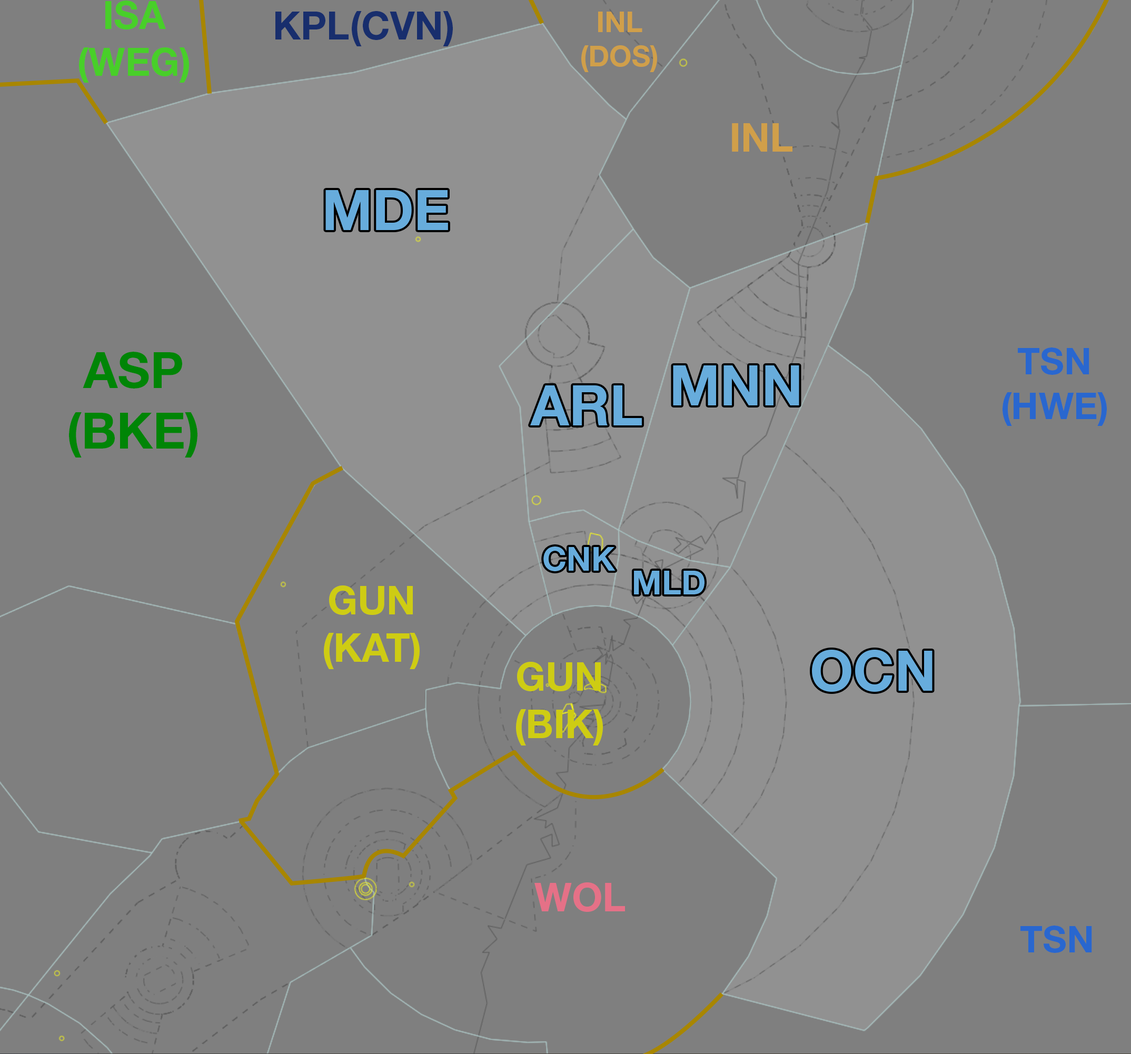
<style>
.page{position:relative;width:1131px;height:1054px;background:#7f7f7f}
.page>*{position:absolute;margin:0}
.t1{font:38.8px "HelveticaNeueLTStd-Bd";color:#48cf29}
.t2{font:38.8px "HelveticaNeueLTStd-Bd";color:#182e6d}
.t3{font:28.7px "HelveticaNeueLTStd-Bd";color:#d09f4a}
.t4{font:39.5px "HelveticaNeueLTStd-Bd";color:#d09f4a}
.t5{font:55.9px "HelveticaNeueLTStd-Bd";color:#67acdc}
.t6{font:50.1px "HelveticaNeueLTStd-Bd";color:#008506}
.t7{font:37.2px "HelveticaNeueLTStd-Bd";color:#2967cf}
.t8{font:33px "HelveticaNeueLTStd-Bd";color:#67acdc}
.t9{font:39.5px "HelveticaNeueLTStd-Bd";color:#cecc13}
.t10{font:39.5px "HelveticaNeueLTStd-Bd";color:#e57187}
</style>
<div class="page">
<p class="t1" style="left:79px;top:1px;width:110px;height:82px;text-align:center">ISA<br>(WEG)</p>
<p class="t2" style="left:275px;top:11px;width:178px;height:35px">KPL(CVN)</p>
<p class="t3" style="left:581px;top:12px;width:76px;height:60px;text-align:center">INL<br>(DOS)</p>
<p class="t4" style="left:732px;top:123px;width:61px;height:29px">INL</p>
<p class="t5" style="left:325px;top:190px;width:123px;height:40px">MDE</p>
<p class="t6" style="left:69px;top:352px;width:128px;height:106px;text-align:center">ASP<br>(BKE)</p>
<p class="t7" style="left:1003px;top:348px;width:104px;height:78px;text-align:center">TSN<br>(HWE)</p>
<p class="t5" style="left:673px;top:365px;width:126px;height:40px">MNN</p>
<p class="t5" style="left:530px;top:385px;width:112px;height:40px">ARL</p>
<p class="t8" style="left:543px;top:547px;width:73px;height:24px">CNK</p>
<p class="t8" style="left:634px;top:571px;width:71px;height:24px">MLD</p>
<p class="t9" style="left:324px;top:586px;width:96px;height:83px;text-align:center">GUN<br>(KAT)</p>
<p class="t5" style="left:812px;top:650px;width:121px;height:42px">OCN</p>
<p class="t9" style="left:516px;top:662px;width:87px;height:84px;text-align:center">GUN<br>(BIK)</p>
<p class="t10" style="left:534px;top:883px;width:91px;height:29px">WOL</p>
<p class="t7" style="left:1021px;top:926px;width:71px;height:27px">TSN</p>
</div>
